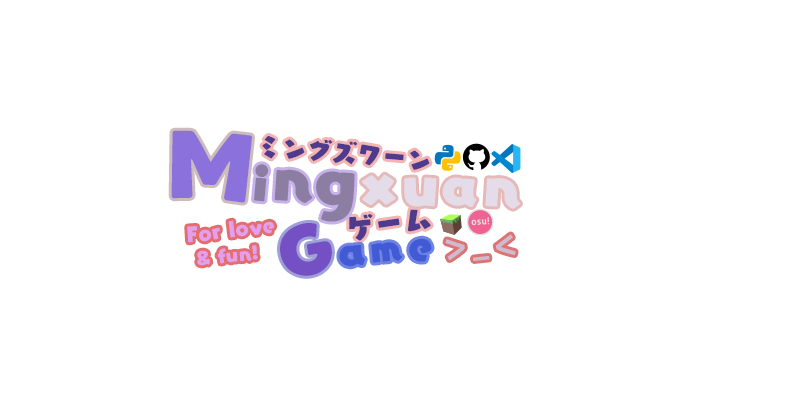
<style>
.page{position:relative;width:800px;height:400px;background:#ffffff}
.page>*{position:absolute;margin:0}
.t1{font:81.1px "YurukaStd-UB";color:#8b71dc}
.t2{font:25.1px "YurukaStd-UB";color:#4f3b8d}
.t3{font:43.3px "YurukaStd-UB";color:#8b7ea2}
.t4{font:53.6px "YurukaStd-UB";color:#8b7ea2}
.t5{font:58.5px "YurukaStd-UB";color:#8b7ea2}
.t6{font:51.1px "YurukaStd-UB";color:#e4dde9}
.t7{font:49.9px "YurukaStd-UB";color:#e4dde9}
.t8{font:48.6px "YurukaStd-UB";color:#e4dde9}
.t9{font:49.4px "YurukaStd-UB";color:#e4dde9}
.t10{font:28.8px "YurukaStd-UB";color:#4f3b8d}
.t11{font:19px "YurukaStd-UB";color:#e39eed}
.t12{font:60.4px "YurukaStd-UB";color:#7550c5}
.t13{font:16.9px "YurukaStd-UB";color:#e39eed}
.t14{font:35.6px "YurukaStd-UB";color:#435ad4}
.t15{font:32.4px "YurukaStd-UB";color:#425ad4}
.t16{font:38px "YurukaStd-UB";color:#425ad4}
.t17{font:44.8px "YurukaStd-UB";color:#d0bace}
.t18{font:44.9px "YurukaStd-UB";color:#d0bace}
.t19{font:37.9px "YurukaStd-UB";color:#d0bace}
</style>
<div class="page">
<p class="t1" style="left:171px;top:130px;width:81px;height:73px;rotate:4deg">M</p>
<p class="t2" style="left:262px;top:136px;width:168px;height:34px;rotate:5deg">ミングズワーン</p>
<p class="t3" style="left:254px;top:164px;width:15px;height:38px;rotate:8deg">i</p>
<p class="t4" style="left:274px;top:169px;width:39px;height:34px;rotate:1deg">n</p>
<p class="t5" style="left:316px;top:171px;width:39px;height:51px;rotate:1deg">g</p>
<p class="t6" style="left:362px;top:174px;width:34px;height:31px;rotate:-5deg">x</p>
<p class="t7" style="left:404px;top:177px;width:33px;height:30px;rotate:1deg">u</p>
<p class="t8" style="left:442px;top:177px;width:35px;height:30px;rotate:1deg">a</p>
<p class="t9" style="left:485px;top:178px;width:35px;height:31px;rotate:1deg">n</p>
<p class="t10" style="left:349px;top:209px;width:82px;height:32px;rotate:-9deg">ゲーム</p>
<p class="t11" style="left:187px;top:220px;width:88px;height:23px;rotate:-7deg">For love</p>
<p class="t12" style="left:280px;top:223px;width:52px;height:53px;rotate:-7deg">G</p>
<p class="t13" style="left:197px;top:245px;width:61px;height:21px;rotate:-6deg">&amp; fun!</p>
<p class="t14" style="left:339px;top:244px;width:26px;height:23px;rotate:-10deg">a</p>
<p class="t15" style="left:371px;top:242px;width:31px;height:21px;rotate:-3deg">m</p>
<p class="t16" style="left:409px;top:238px;width:23px;height:24px;rotate:-6deg">e</p>
<p class="t17" style="left:445px;top:239px;width:20px;height:21px;rotate:-9deg">&gt;</p>
<p class="t18" style="left:495px;top:234px;width:21px;height:21px;rotate:-11deg">&lt;</p>
<p class="t19" style="left:473px;top:256px;width:17px;height:5px;rotate:-6deg">_</p>
</div>
